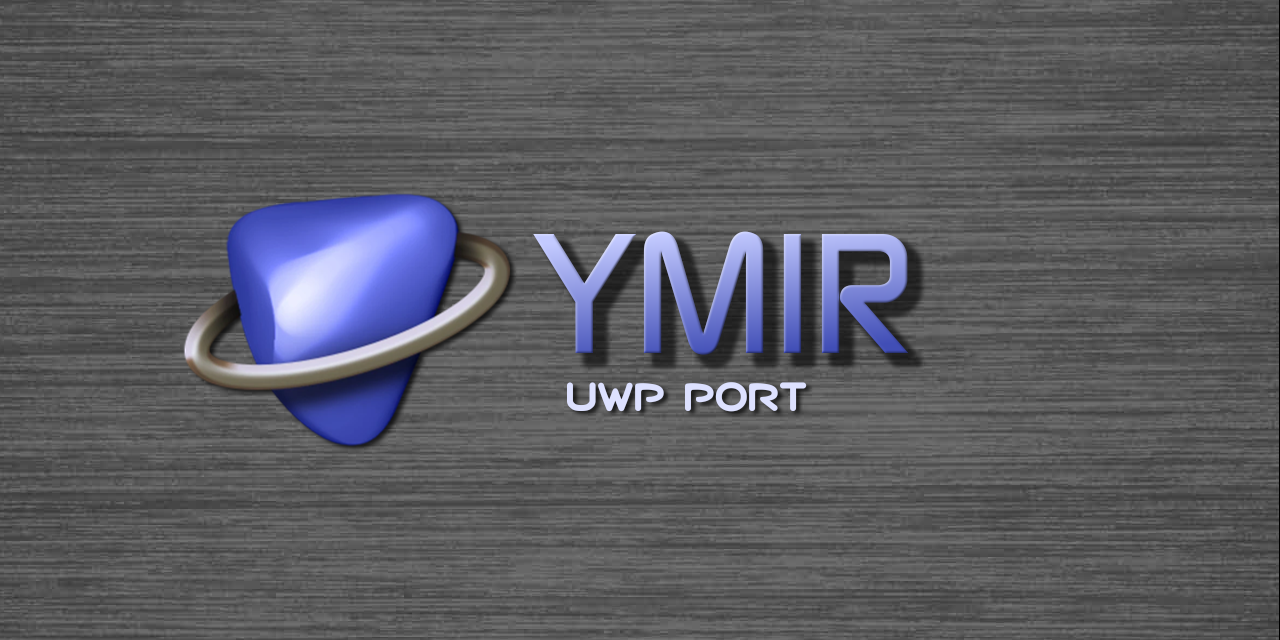
<style>
.page{position:relative;width:1280px;height:640px}
.page>*{position:absolute;margin:0}
.t1{font:170px "ContinuumMedium"}
.t2{font:38px "NiseSegaSaturnU";color:#dde1ff}
</style>
<div class="page">
<p class="t1" style="left:533px;top:231px;width:376px;height:124px">YMIR</p>
<p class="t2" style="left:567px;top:382px;width:240px;height:30px">uwp port</p>
</div>
